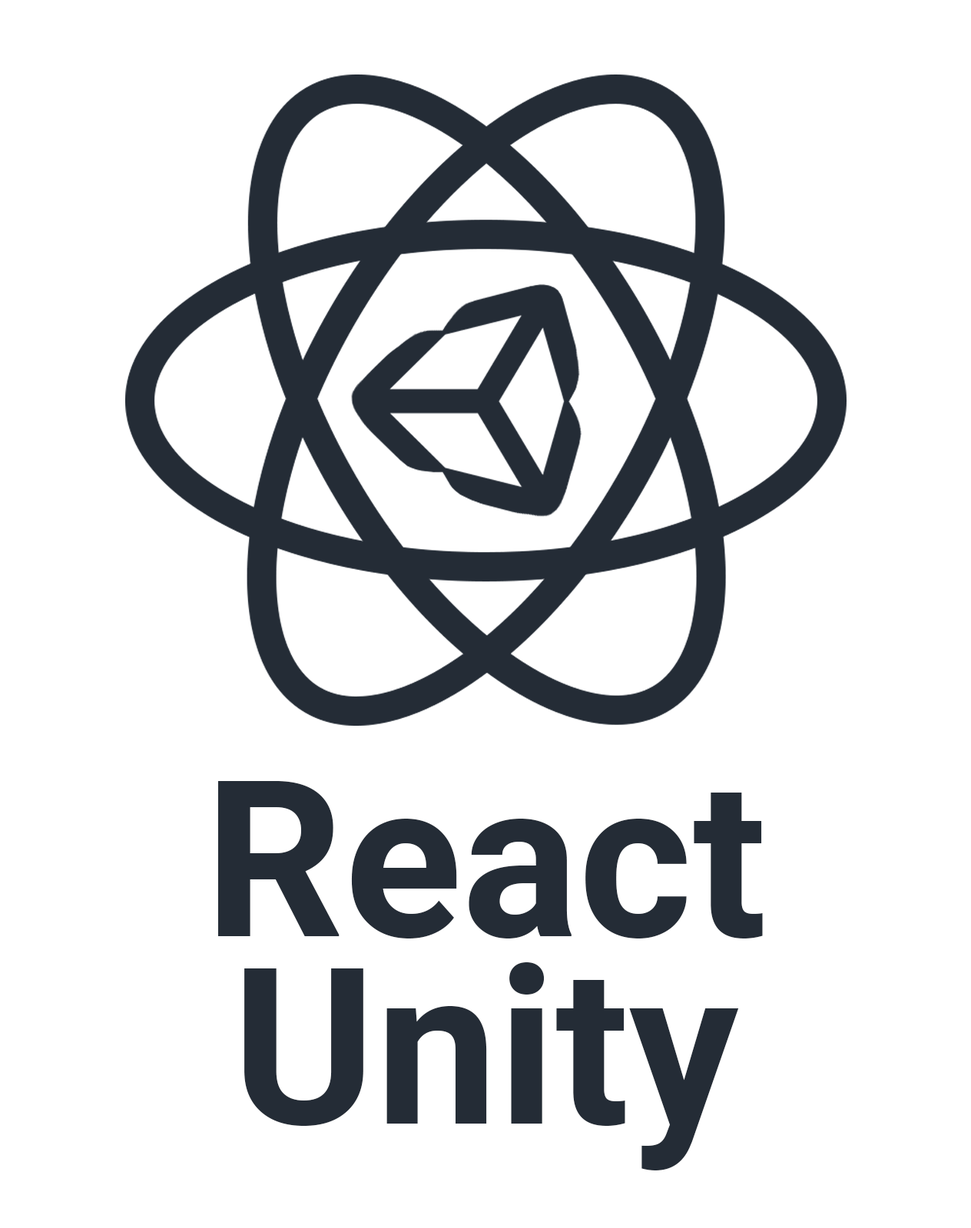
<style>
.page{position:relative;width:971px;height:1228px;background:#ffffff}
.page>*{position:absolute;margin:0}
.t1{font:218.1px "Roboto-Bold";color:#242c36}
</style>
<div class="page">
<p class="t1" style="left:218px;top:781px;width:545px;height:158px">React</p>
<p class="t1" style="left:244px;top:962px;width:495px;height:209px">Unity</p>
</div>
